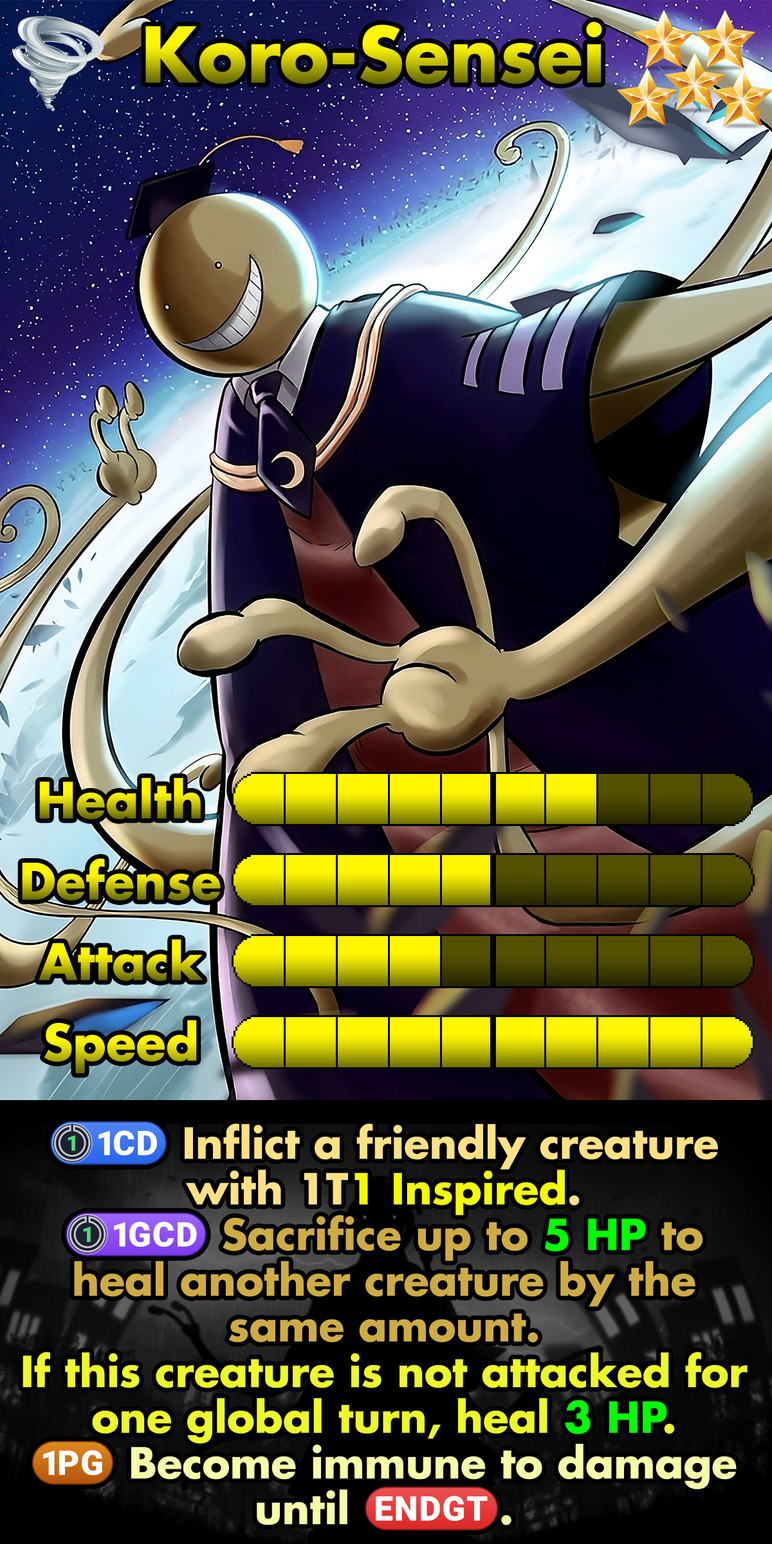
<style>
.page{position:relative;width:772px;height:1544px}
.page>*{position:absolute;margin:0}
.t1{font:128px "Futura-Bold"}
.t2{font:83.6px "Futura-Bold"}
.t3{font:71.4px/45.7px "Futura-Bold";color:#edf928}
.t4{font:76.5px/45.7px "stoogedings-Regular";color:#ffe185}
.t5{font:71.4px/45.7px "Futura-Bold";color:#ffe185}
.t6{font:71.4px/45.7px "Futura-Bold";color:#f3fc00}
.t7{font:76.5px/45.7px "stoogedings-Regular";color:#ceac43}
.t8{font:71.4px/45.7px "Futura-Bold";color:#ceac43}
.t9{font:71.4px/45.7px "Futura-Bold";color:#00ff00}
.t10{font:76.5px/45.7px "stoogedings-Regular";color:#f7fca8}
.t11{font:71.4px/45.7px "Futura-Bold";color:#f7fca8}
</style>
<div class="page">
<p class="t1" style="left:145px;top:22px;width:457px;height:62px">Koro-Sensei</p>
<p class="t2" style="left:39px;top:778px;width:162px;height:42px">Health</p>
<p class="t2" style="left:22px;top:858px;width:199px;height:43px">Defense</p>
<p class="t2" style="left:39px;top:939px;width:164px;height:42px">Attack</p>
<p class="t2" style="left:44px;top:1020px;width:153px;height:54px">Speed</p>
<p class="t3" style="left:23px;top:1121px;width:725px;height:410px;text-align:center"><span class="t4">(1CD)</span><span class="t5"> Inflict a friendly creature with 1T</span><span class="t6">1 Inspired</span><span class="t5">.<br></span><span class="t7">(1GCD)</span><span class="t8"> Sacrifice up to </span><span class="t9">5 HP</span><span class="t8"> to heal another creature by the same amount.<br></span>If this creature is not attacked for one global turn, heal <span class="t9">3 HP</span>.<br><span class="t10">(1PG)</span><span class="t11"> Become immune to damage until </span><span class="t10">(ENDGT)</span><span class="t11">.</span></p>
</div>
